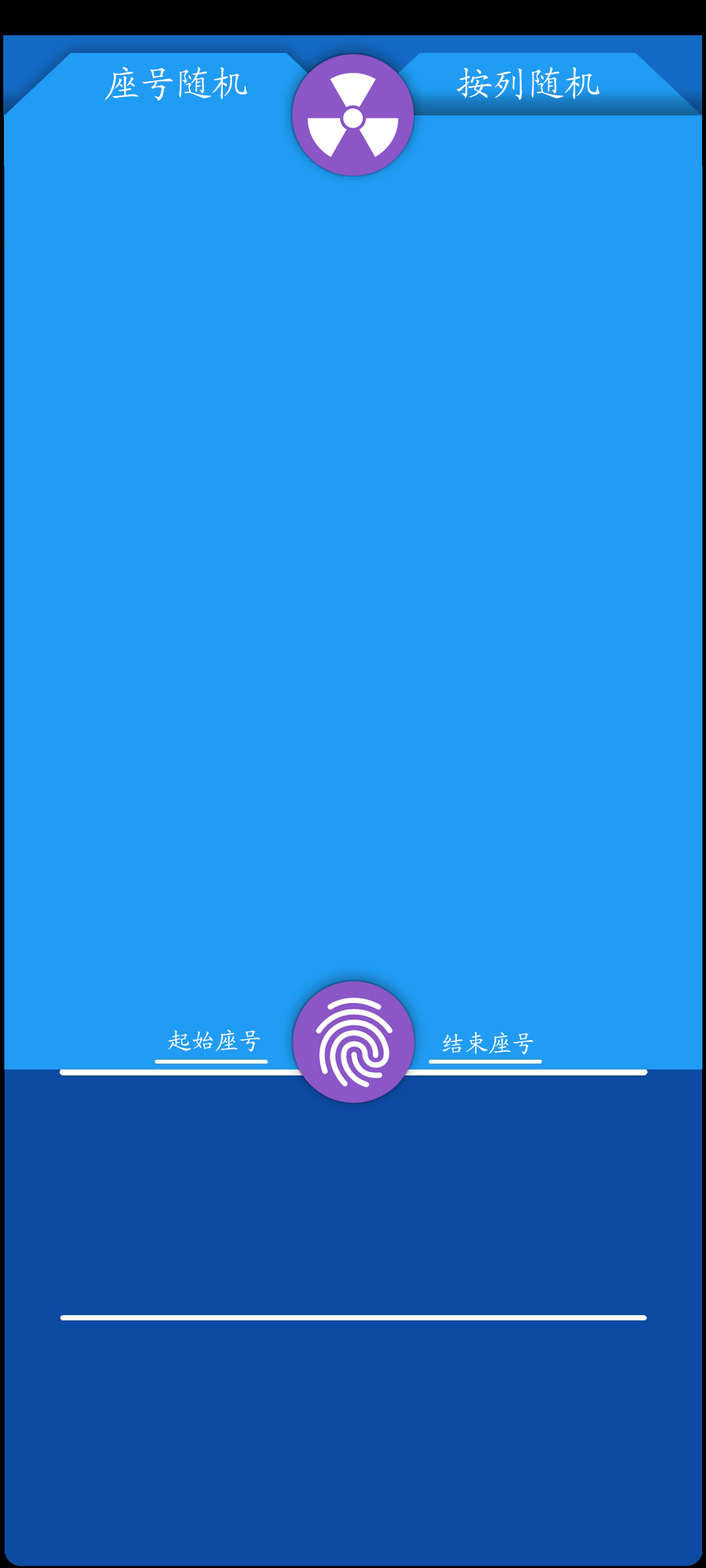
<style>
.page{position:relative;width:706px;height:1568px;background:#209cf4}
.page>*{position:absolute;margin:0}
.t1{font:35.9px "KaiTi_GB2312";color:#fffefe}
.t2{font:35.9px "KaiTi_GB2312";color:#ffffff}
.t3{font:23.5px "KaiTi_GB2312";color:#ffffff}
</style>
<div class="page">
<p class="t1" style="left:105px;top:67px;width:142px;height:34px">座号随机</p>
<p class="t2" style="left:456px;top:67px;width:143px;height:33px">按列随机</p>
<p class="t3" style="left:168px;top:1030px;width:92px;height:22px">起始座号</p>
<p class="t3" style="left:442px;top:1032px;width:91px;height:22px">结束座号</p>
</div>
